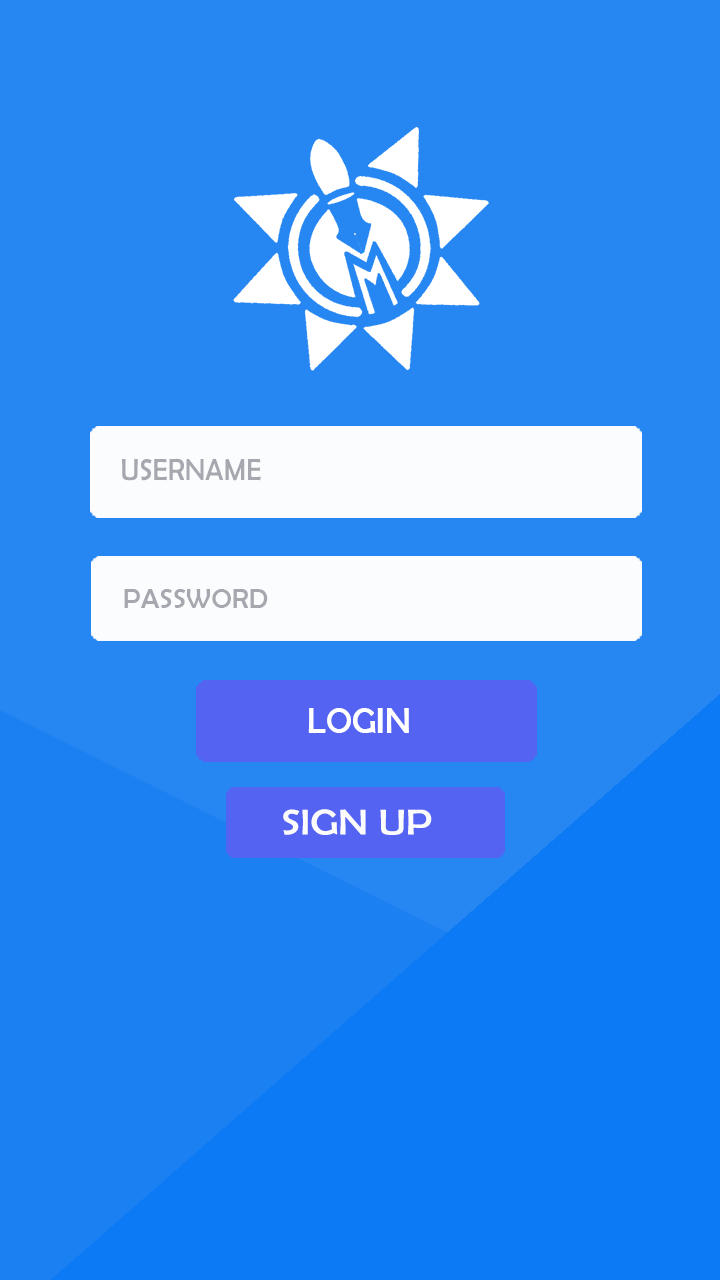
<style>
.page{position:relative;width:720px;height:1280px;background:#2787f2}
.page>*{position:absolute;margin:0}
.t1{font:30.7px "BerlinSansFB-Reg";color:#a6a7af;scale:0.93 1}
.t2{font:28.3px "BerlinSansFB-Reg";color:#a6a7af}
.t3{font:36px "BerlinSansFB-Reg";color:#ffffff}
.t4{font:36.3px "BerlinSansFB-Reg";color:#fbfbfb;scale:1.14 1}
</style>
<div class="page">
<p class="t1" style="left:122px;top:458px;width:139px;height:23px">USERNAME</p>
<p class="t2" style="left:124px;top:589px;width:144px;height:19px">PASSWORD</p>
<p class="t3" style="left:308px;top:708px;width:101px;height:25px">LOGIN</p>
<p class="t4" style="left:283px;top:809px;width:149px;height:26px">SIGN UP</p>
</div>
